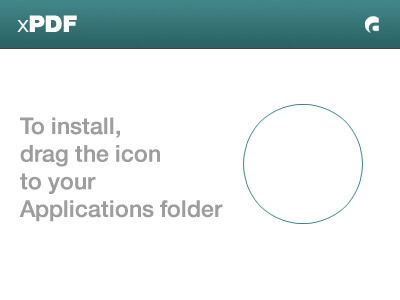
<style>
.page{position:relative;width:400px;height:300px;background:#ffffff}
.page>*{position:absolute;margin:0}
.t1{font:23px "HelveticaNeue-Black";color:#fdfdfd}
.t2{font:23px "HelveticaNeue-Light";color:#fdfdfd}
.t3{font:23px "HelveticaNeue-Medium";color:#9d9d9d}
</style>
<div class="page">
<p class="t1" style="left:17px;top:15px;width:60px;height:17px"><span class="t2">x</span>PDF</p>
<p class="t3" style="left:19px;top:117px;width:204px;height:105px">To install, <br>drag the icon<br>to your <br>Applications folder</p>
</div>
